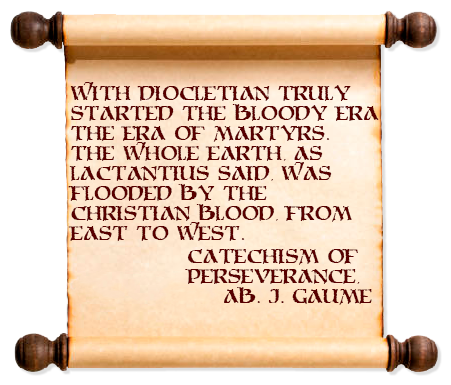
<style>
.page{position:relative;width:451px;height:385px;background:#ffffff}
.page>*{position:absolute;margin:0}
.t1{font:16.7px "MoriaCitadel";color:#580000}
</style>
<div class="page">
<p class="t1" style="left:68px;top:82px;width:311px;height:159px">With Diocletian truly<br>started the bloody era<br>the era of Martyrs.<br>The whole Earth, as<br>Lactantius said, was<br>flooded by the<br>christian blood, from<br>East to West.</p>
<p class="t1" style="left:185px;top:249px;width:187px;height:56px">Catechism of<br>Perseverance,<br> Ab. J. Gaume</p>
</div>
